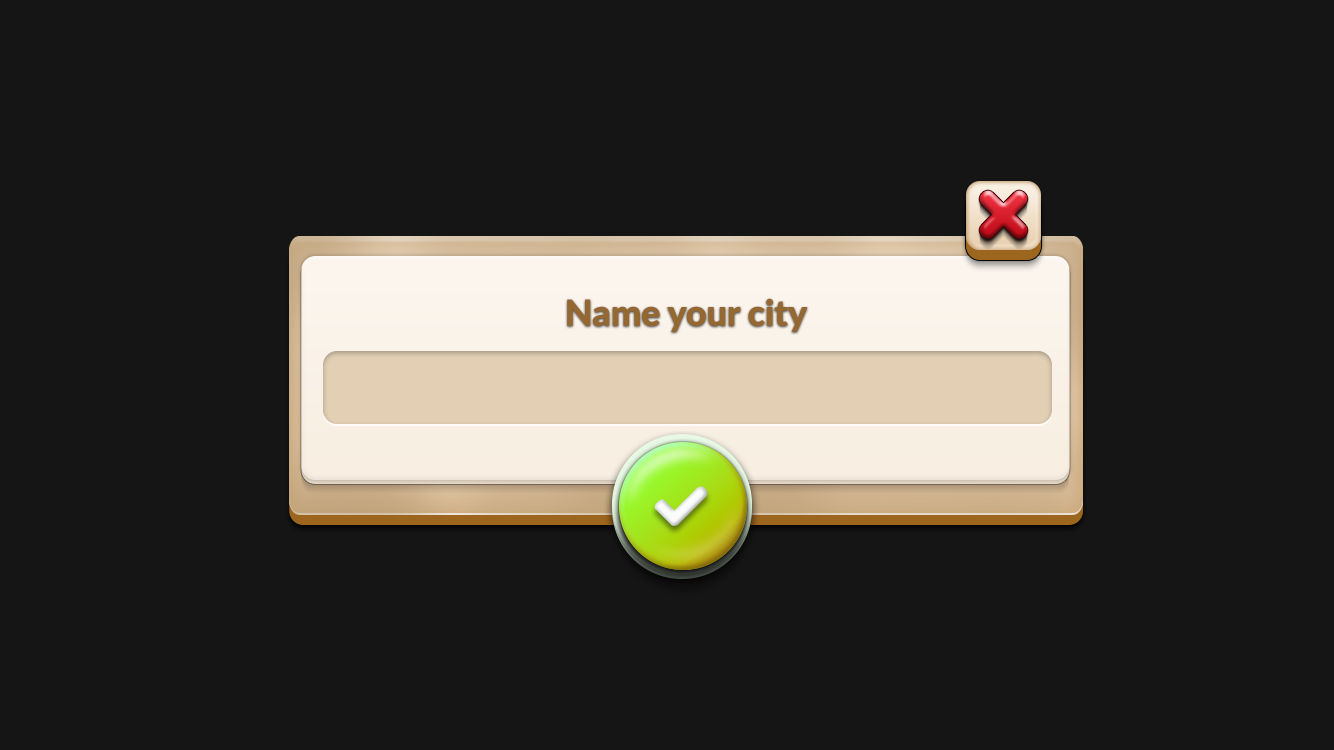
<style>
.page{position:relative;width:1334px;height:750px;background:#161515}
.page>*{position:absolute;margin:0}
.t1{font:36.2px "Lato-Black";letter-spacing:-0.01em;color:#8d5d1c}
</style>
<div class="page">
<p class="t1" style="left:567px;top:298px;width:241px;height:34px;opacity:0.95">Name your city</p>
</div>
